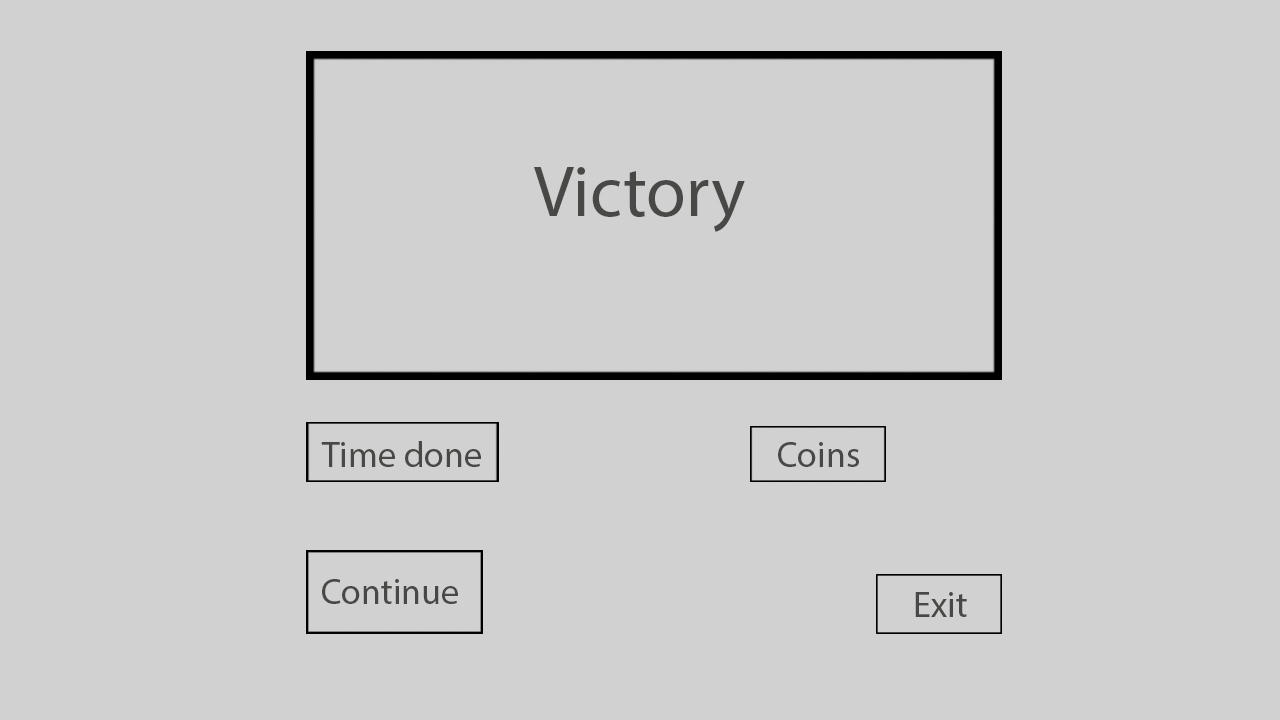
<style>
.page{position:relative;width:1280px;height:720px;background:#d1d1d1}
.page>*{position:absolute;margin:0}
.t1{font:72px "MyriadPro-Regular";color:#484846}
.t2{font:36px "MyriadPro-Regular";color:#484846}
</style>
<div class="page">
<p class="t1" style="left:534px;top:167px;width:211px;height:65px">Victory</p>
<p class="t2" style="left:321px;top:441px;width:160px;height:26px">Time done</p>
<p class="t2" style="left:778px;top:442px;width:81px;height:25px">Coins</p>
<p class="t2" style="left:322px;top:579px;width:136px;height:25px">Continue</p>
<p class="t2" style="left:915px;top:592px;width:52px;height:25px">Exit</p>
</div>
